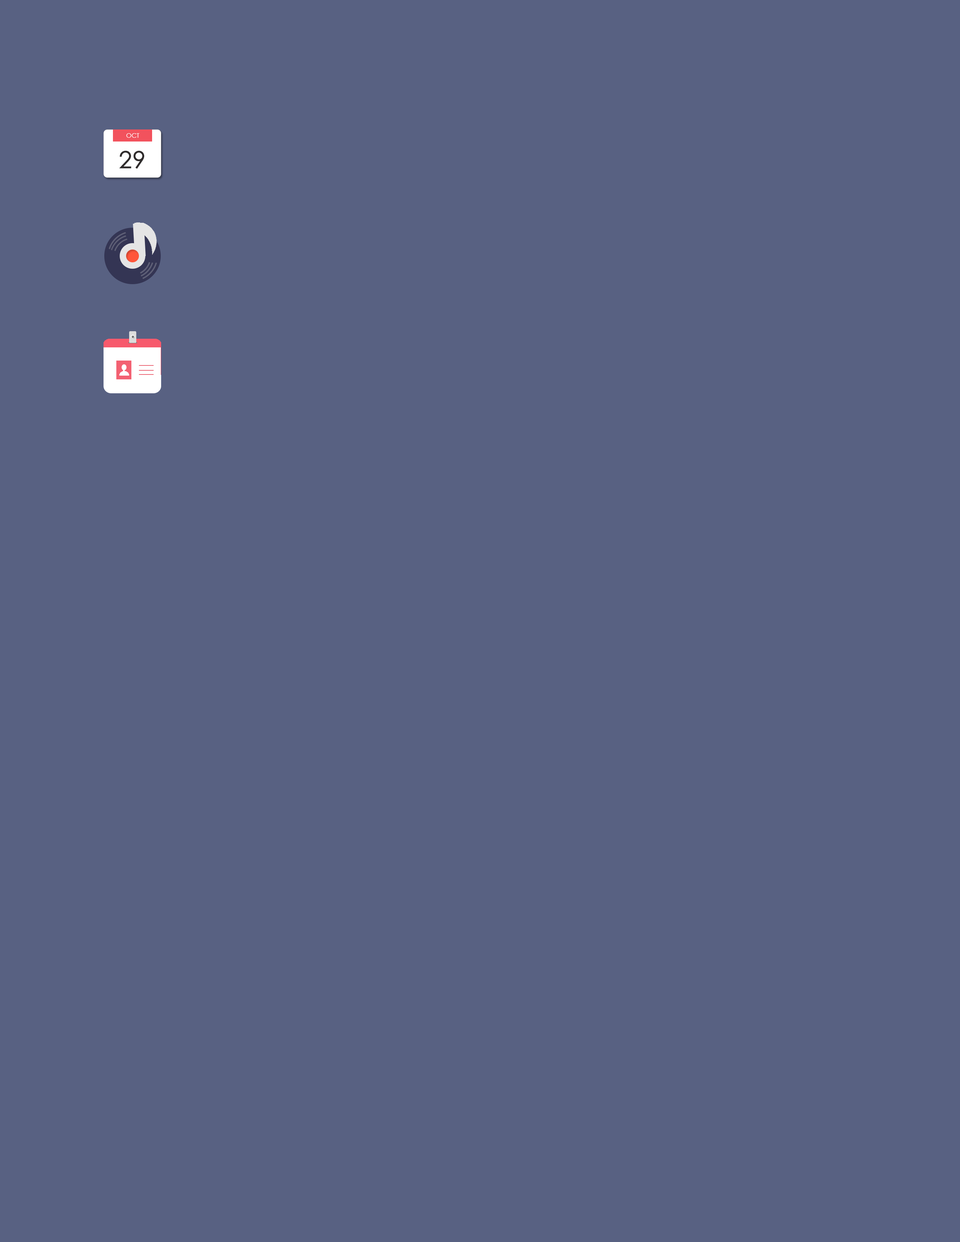
<style>
.page{position:relative;width:960px;height:1242px;background:#586182}
.page>*{position:absolute;margin:0}
.t1{font:6.3px "STXihei";color:#ffffff}
.t2{font:23.5px "CenturyGothic";color:#2f2b2b;font-weight:bold}
</style>
<div class="page">
<p class="t1" style="left:126px;top:133px;width:13px;height:5px">OCT</p>
<p class="t2" style="left:119px;top:151px;width:25px;height:18px">29</p>
</div>
